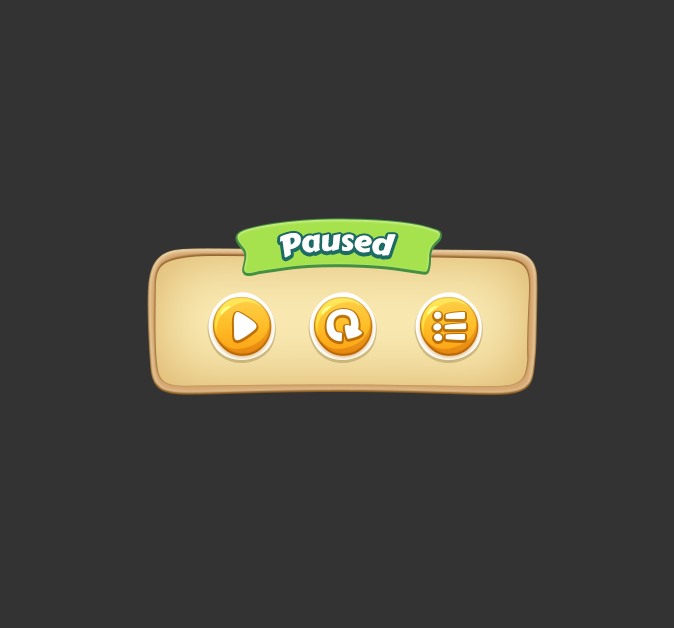
<style>
.page{position:relative;width:674px;height:628px;background:#333333}
.page>*{position:absolute;margin:0}
.t1{font:30px "CarterOne";letter-spacing:-0.02em;color:#ffffff}
</style>
<div class="page">
<p class="t1" style="left:280px;top:233px;width:116px;height:25px">Paused</p>
</div>
